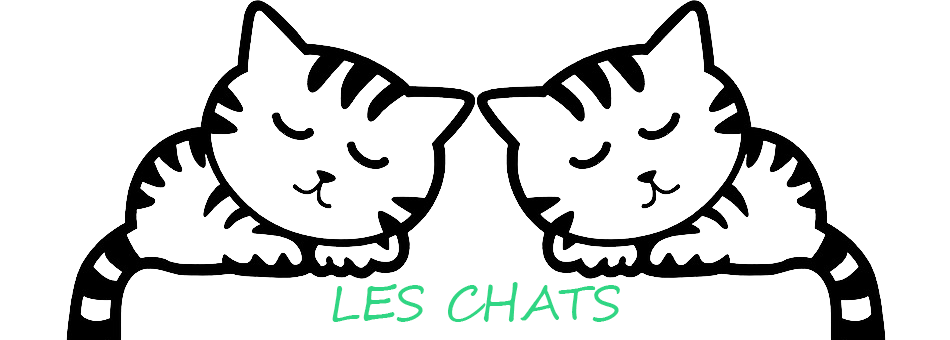
<style>
.page{position:relative;width:950px;height:340px;background:#ffffff}
.page>*{position:absolute;margin:0}
.t1{font:48px "SegoeScript";color:#30d684}
</style>
<div class="page">
<p class="t1" style="left:332px;top:282px;width:288px;height:40px">LES CHATS</p>
</div>
